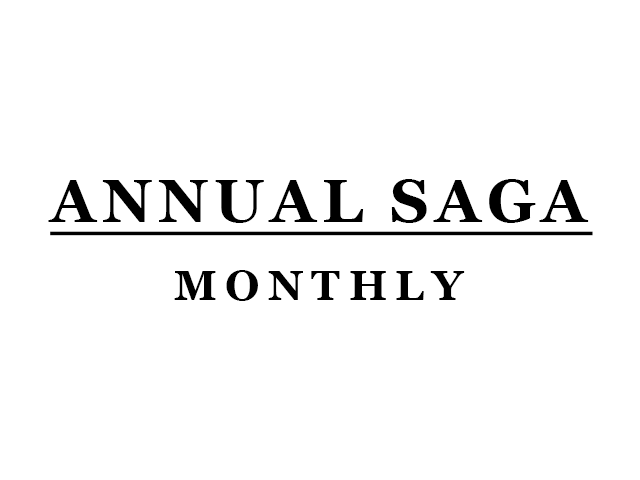
<style>
.page{position:relative;width:640px;height:480px;background:#ffffff}
.page>*{position:absolute;margin:0}
.t1{font:60px/78px "Georgia-Bold";letter-spacing:0.1em;color:#000000;text-decoration:underline}
.t2{font:42px/78px "Georgia-Bold";letter-spacing:0.2em;color:#000000}
</style>
<div class="page">
<p class="t1" style="left:48px;top:179px;width:545px;height:122px;text-align:center">ANNUAL SAGA<br><span class="t2">MONTHLY</span></p>
</div>
